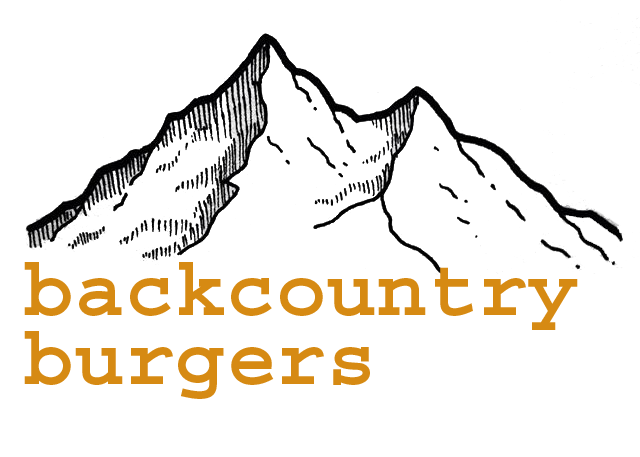
<style>
.page{position:relative;width:640px;height:457px;background:#ffffff}
.page>*{position:absolute;margin:0}
.t1{font:84px "CourierStd-Bold";color:#d68a13}
</style>
<div class="page">
<p class="t1" style="left:24px;top:262px;width:554px;height:137px">backcountry burgers</p>
</div>
